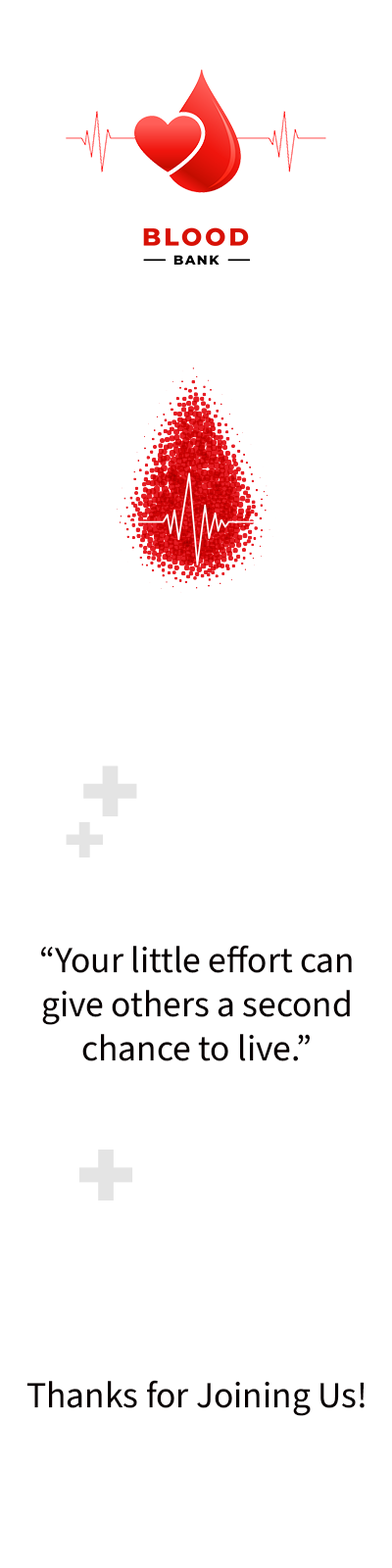
<style>
.page{position:relative;width:392px;height:1568px;background:#ffffff}
.page>*{position:absolute;margin:0}
.t1{font:36.8px "SourceSansRoman-Regular";color:#080000}
</style>
<div class="page">
<p class="t1" style="left:41px;top:945px;width:311px;height:116px;text-align:center">“Your little effort can<br>give others a second<br>chance to live.”</p>
<p class="t1" style="left:26px;top:1380px;width:339px;height:36px">Thanks for Joining Us!</p>
</div>
